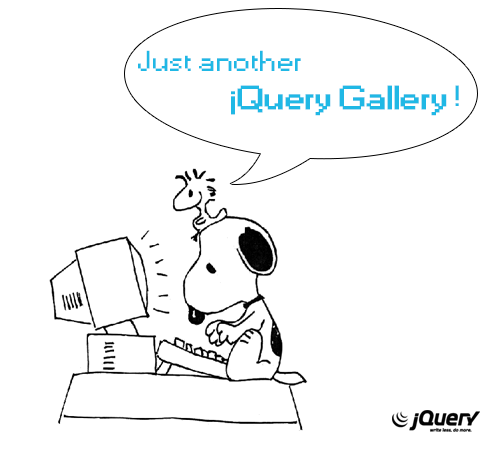
<style>
.page{position:relative;width:500px;height:456px;background:#ffffff}
.page>*{position:absolute;margin:0}
.t1{font:31.3px "Small Fonts";color:#20b8e5;font-weight:bold;scale:1.38 1}
.t2{font:27px "Small Fonts";color:#20b8e5;scale:1.38 1}
.t3{font:27px "Small Fonts";color:#20b8e5;font-weight:bold;scale:1.38 1}
.t4{font:31.3px "Small Fonts";color:#20b8e5;scale:1.38 1}
</style>
<div class="page">
<p class="t1" style="left:138px;top:50px;width:321px;height:66px"><span class="t2">Just another<br>               </span><span class="t3"> j</span>Query Gallery <span class="t4">!</span></p>
</div>
